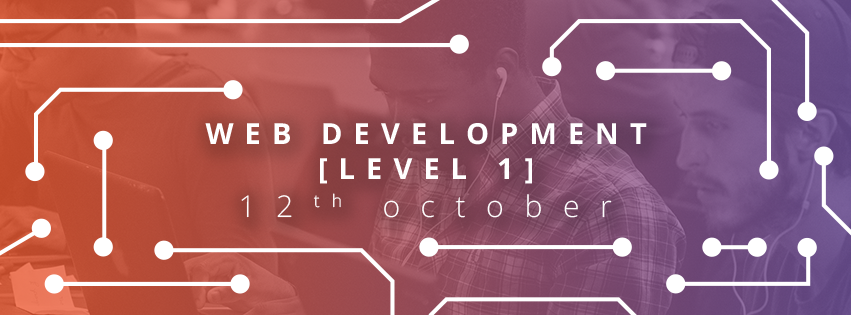
<style>
.page{position:relative;width:851px;height:315px}
.page>*{position:absolute;margin:0}
.t1{font:29px "OpenSans-Bold";letter-spacing:0.38em;color:#ffffff}
.t2{font:30.1px "OpenSans-Light";letter-spacing:0.68em;color:#ffffff}
</style>
<div class="page">
<p class="t1" style="left:205px;top:123px;width:442px;height:61px;text-align:center">WEB DEVELOPMENT <br>[LEVEL 1]</p>
<p class="t2" style="left:241px;top:193px;width:371px;height:25px">12th october</p>
</div>
